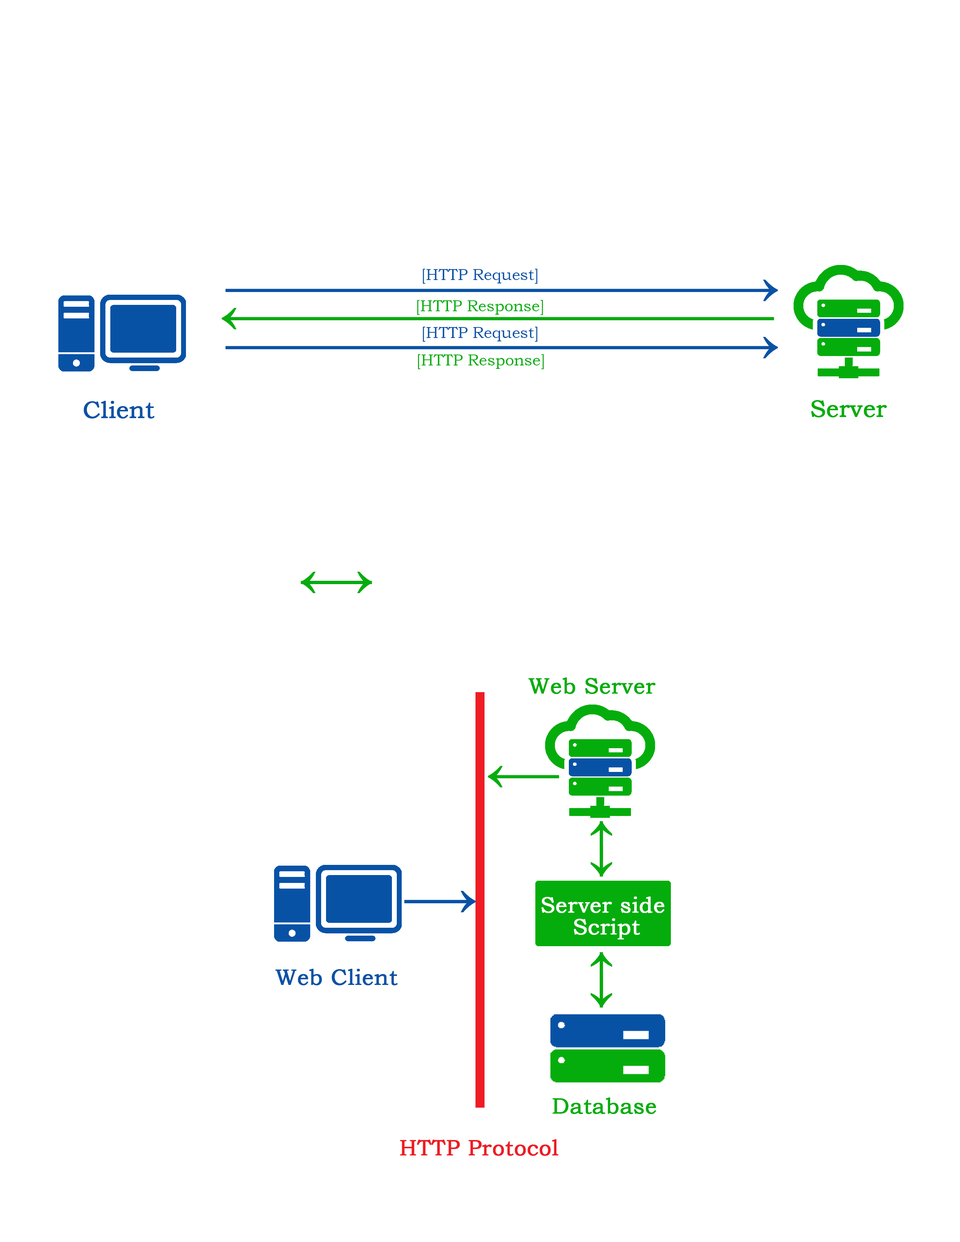
<style>
.page{position:relative;width:960px;height:1242px;background:#ffffff}
.page>*{position:absolute;margin:0}
.t1{font:15.7px "BookmanOldStyle";color:#0852a6}
.t2{font:15.7px "BookmanOldStyle";color:#04ad0c}
.t3{font:23.5px "BookmanOldStyle";color:#0852a6;font-weight:bold}
.t4{font:23.5px "BookmanOldStyle";color:#04ad0c;font-weight:bold}
.t5{font:22px "BookmanOldStyle";color:#04ad0c;font-weight:bold}
.t6{font:22px/22px "BookmanOldStyle";color:#ffffff;font-weight:bold}
.t7{font:22px "BookmanOldStyle";color:#0852a6;font-weight:bold}
.t8{font:22px "BookmanOldStyle";color:#ed1c24;font-weight:bold}
</style>
<div class="page">
<p class="t1" style="left:423px;top:269px;width:115px;height:15px">[HTTP Request]</p>
<p class="t2" style="left:417px;top:300px;width:126px;height:15px">[HTTP Response]</p>
<p class="t1" style="left:423px;top:327px;width:115px;height:15px">[HTTP Request]</p>
<p class="t2" style="left:418px;top:354px;width:126px;height:15px">[HTTP Response]</p>
<p class="t3" style="left:84px;top:401px;width:70px;height:18px">Client</p>
<p class="t4" style="left:811px;top:400px;width:76px;height:17px">Server</p>
<p class="t5" style="left:528px;top:678px;width:127px;height:16px">Web Server</p>
<p class="t6" style="left:541px;top:897px;width:123px;height:43px;text-align:center">Server side <br>Script</p>
<p class="t7" style="left:275px;top:969px;width:123px;height:17px">Web Client</p>
<p class="t5" style="left:552px;top:1098px;width:104px;height:16px">Database</p>
<p class="t8" style="left:400px;top:1139px;width:158px;height:17px">HTTP Protocol</p>
</div>
